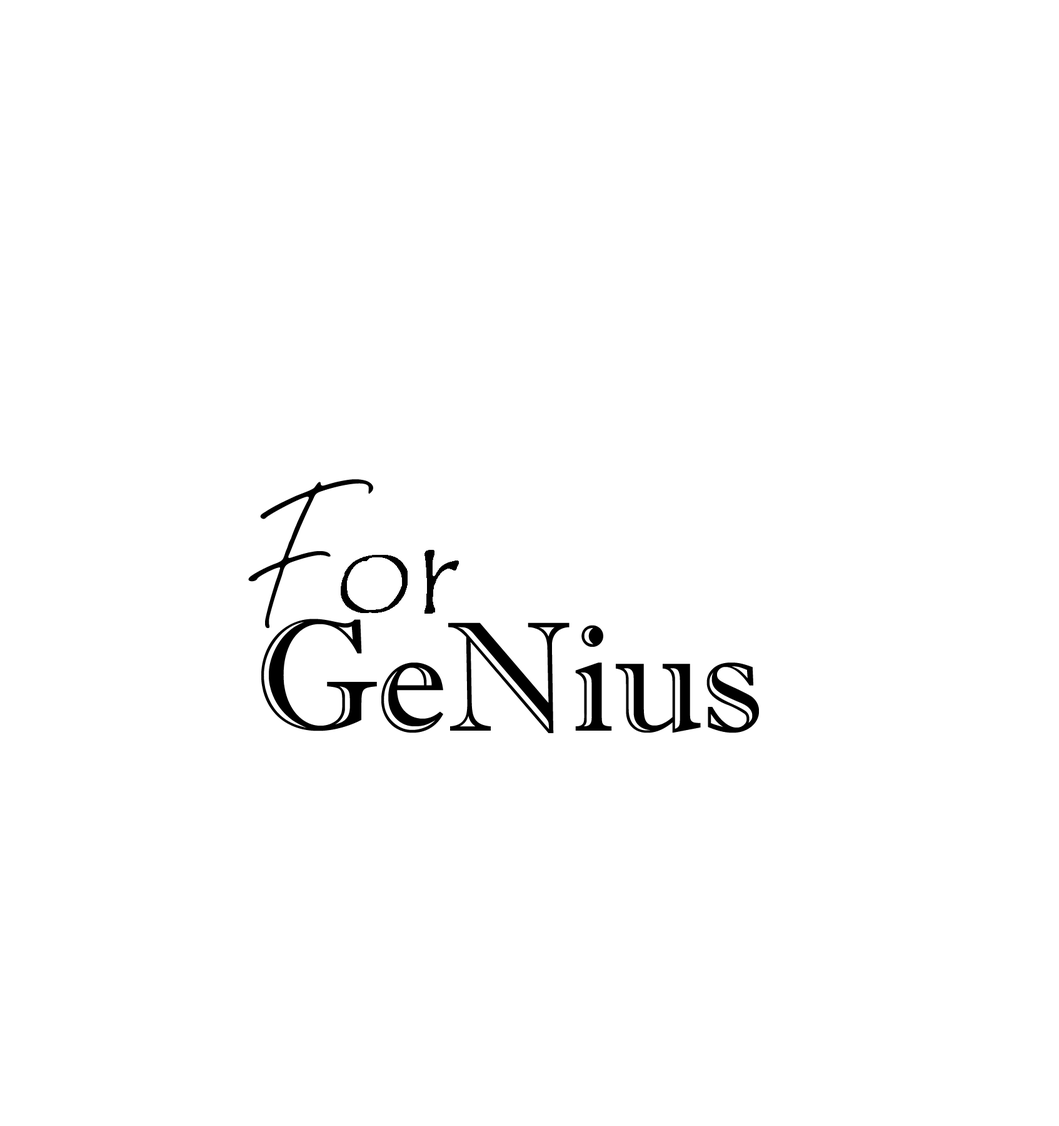
<style>
.page{position:relative;width:1059px;height:1126px;background:#ffffff}
.page>*{position:absolute;margin:0}
.t1{font:216.3px "Lunafreya-Regular";color:#000000}
.t2{font:156.3px "ImprintMT-Shadow";color:#000000}
</style>
<div class="page">
<p class="t1" style="left:248px;top:479px;width:125px;height:149px">F</p>
<p class="t2" style="left:261px;top:618px;width:116px;height:113px">G</p>
<p class="t2" style="left:381px;top:622px;width:378px;height:111px">eNius</p>
</div>
